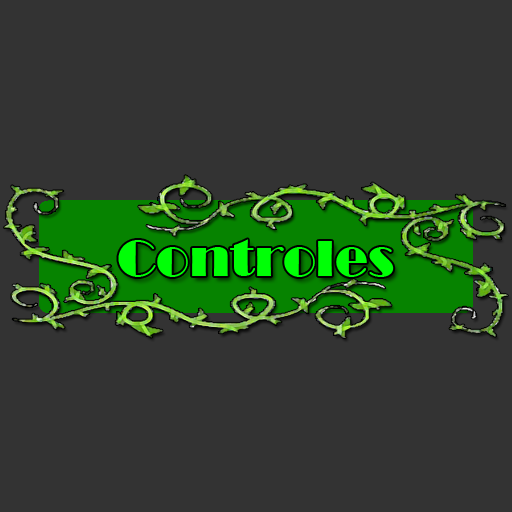
<style>
.page{position:relative;width:512px;height:512px;background:#333333}
.page>*{position:absolute;margin:0}
.t1{font:52.3px "Broadway";color:#00ff06;scale:1.05 1}
</style>
<div class="page">
<p class="t1" style="left:118px;top:239px;width:276px;height:38px">Controles</p>
</div>
